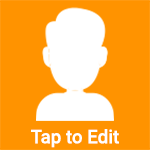
<style>
.page{position:relative;width:150px;height:150px;background:#ff9300}
.page>*{position:absolute;margin:0}
.t1{font:18.8px "Roboto-Medium";color:#ffffff}
</style>
<div class="page">
<p class="t1" style="left:31px;top:129px;width:88px;height:19px">Tap to Edit</p>
</div>
